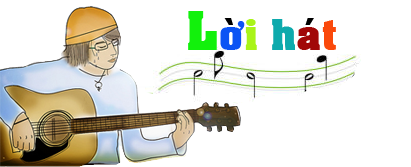
<style>
.page{position:relative;width:411px;height:167px;background:#ffffff}
.page>*{position:absolute;margin:0}
.t1{font:60px "VNI-Auchon-Bold";color:#12f10c}
.t2{font:48px "VNI-Auchon-Bold";color:#0b53f4}
.t3{font:48px "VNI-Auchon-Bold";color:#000000}
.t4{font:48px "VNI-Auchon-Bold";color:#a9f418}
.t5{font:48px "VNI-Auchon-Bold";color:#0daaac}
.t6{font:48px "VNI-Auchon-Bold";color:#a10707}
.t7{font:48px "VNI-Auchon-Bold";color:#fa490b}
</style>
<div class="page">
<p class="t1" style="left:188px;top:11px;width:148px;height:39px">L<span class="t2">ô</span><span class="t3">ø</span><span class="t4">i </span><span class="t5">h</span><span class="t6">a</span><span class="t3">ù</span><span class="t7">t</span></p>
</div>
